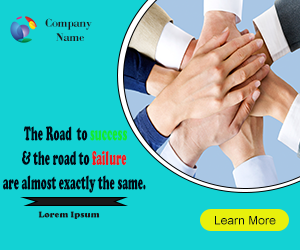
<style>
.page{position:relative;width:300px;height:250px;background:#13d2d4}
.page>*{position:absolute;margin:0}
.t1{font:12px "BodoniMT-Bold";letter-spacing:0.005em;color:#191919}
.t2{font:20.5px "CooperBlack";letter-spacing:0.005em;color:#020a14;scale:0.49 1}
.t3{font:20.5px "CooperBlack";letter-spacing:0.005em;color:#12eb30;scale:0.49 1}
.t4{font:20.5px "CooperBlack";letter-spacing:0.005em;color:#f1171c;scale:0.49 1}
.t5{font:9px "CooperBlack";letter-spacing:0.005em;color:#191919}
.t6{font:12px "ArialUnicodeMS";letter-spacing:0.005em;color:#020a14}
</style>
<div class="page">
<p class="t1" style="left:45px;top:18px;width:47px;height:23px;text-align:center">Company <br>Name</p>
<p class="t2" style="left:3px;top:126px;width:143px;height:67px;text-align:center">The Road  to <span class="t3">success</span> <br>&amp; the road to <span class="t4">failure  <br></span>are almost exactly the same.</p>
<p class="t5" style="left:38px;top:211px;width:62px;height:8px">Lorem Ipsum</p>
<p class="t6" style="left:215px;top:216px;width:61px;height:9px">Learn More</p>
</div>
